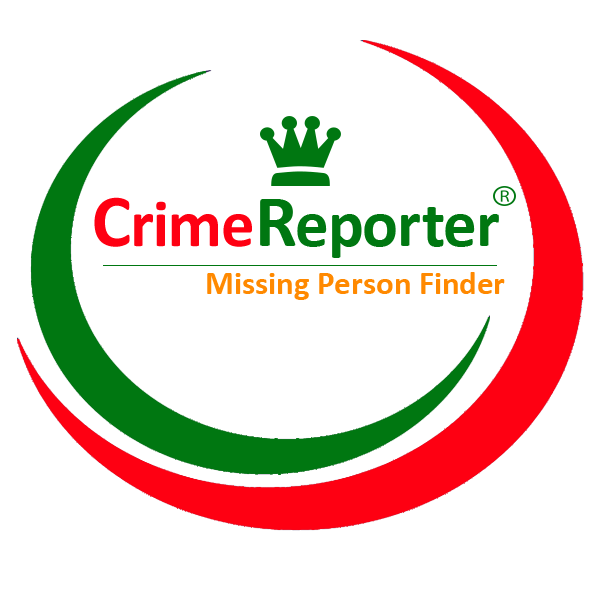
<style>
.page{position:relative;width:600px;height:600px;background:#ffffff}
.page>*{position:absolute;margin:0}
.t1{font:66.7px "Calibri-Bold";color:#fe0012}
.t2{font:75px "Calibri-Bold";color:#fe0012}
.t3{font:66.7px "Calibri-Bold";color:#007711}
.t4{font:75px "Calibri-Bold";color:#007711}
.t5{font:33.3px "Calibri-Bold";color:#ff8900}
</style>
<div class="page">
<p class="t1" style="left:94px;top:197px;width:158px;height:50px"><span class="t2">C</span>rime</p>
<p class="t3" style="left:260px;top:199px;width:239px;height:59px"><span class="t4">R</span>eporter</p>
<p class="t5" style="left:207px;top:272px;width:298px;height:28px">Missing Person Finder</p>
</div>
